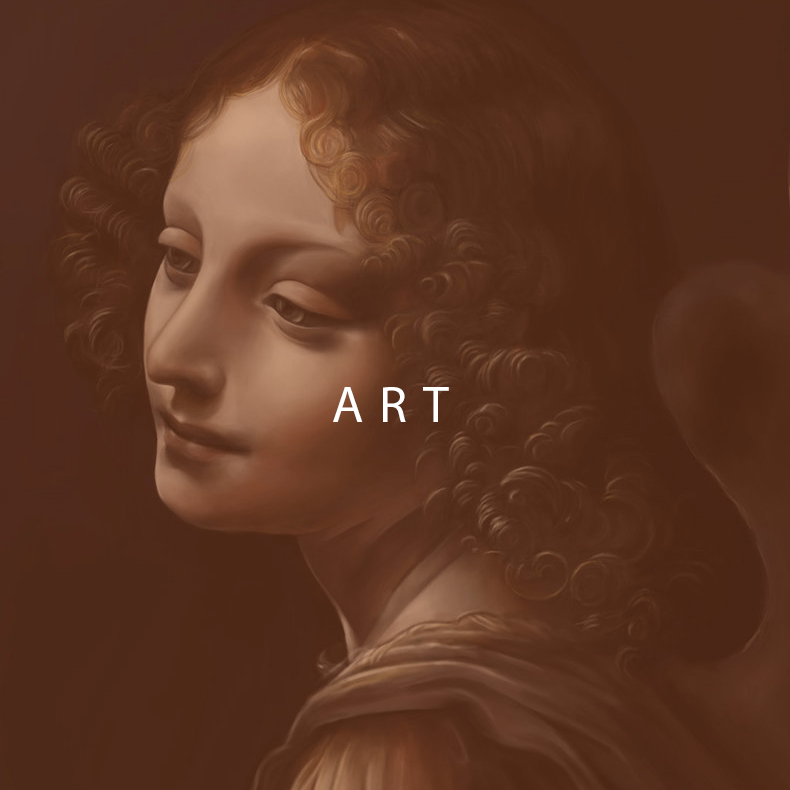
<style>
.page{position:relative;width:790px;height:790px}
.page>*{position:absolute;margin:0}
.t1{font:51.7px "MyriadPro-Regular";letter-spacing:0.3em;color:#ffffff}
</style>
<div class="page">
<p class="t1" style="left:333px;top:387px;width:116px;height:35px">ART</p>
</div>
